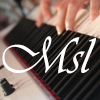
<style>
.page{position:relative;width:100px;height:100px}
.page>*{position:absolute;margin:0}
.t1{font:52.5px "Vivaldii";color:#ffffff}
</style>
<div class="page">
<p class="t1" style="left:2px;top:36px;width:94px;height:38px">Msl</p>
</div>
